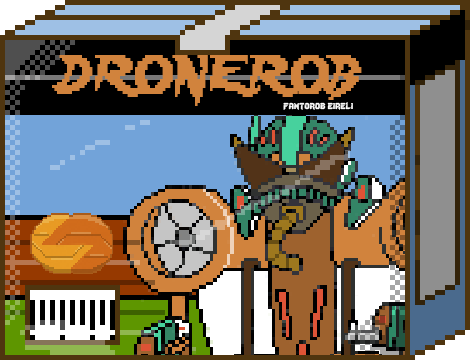
<style>
.page{position:relative;width:470px;height:360px}
.page>*{position:absolute;margin:0}
.t1{font:48px "Lady-Radical";color:#d1833d;scale:0.84 1}
.t2{font:12px "Lady-Radical";color:#fbfbfb}
</style>
<div class="page">
<p class="t1" style="left:52px;top:55px;width:310px;height:51px">DRONEROB</p>
<p class="t2" style="left:283px;top:102px;width:70px;height:8px">fantorob eireli</p>
</div>
